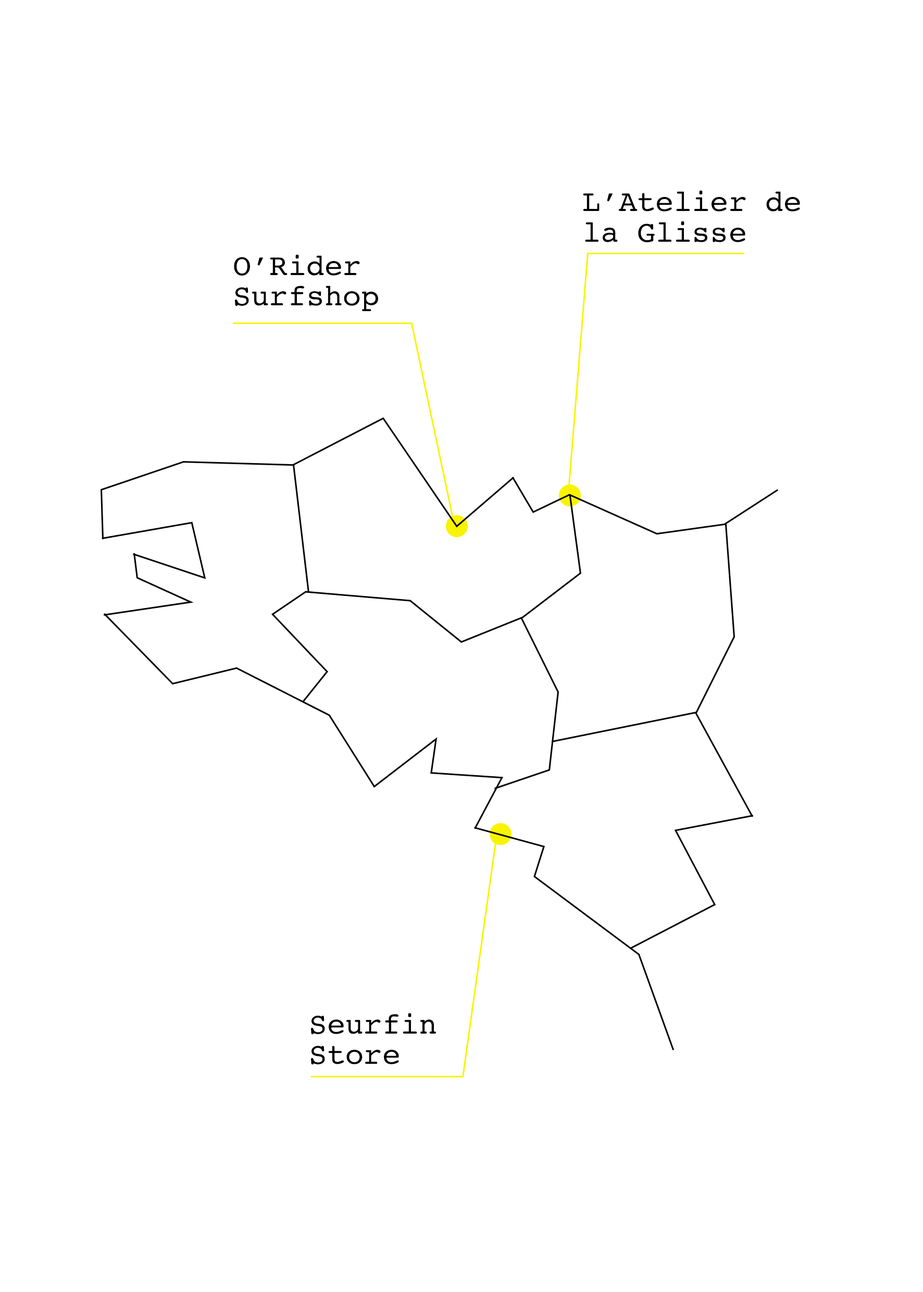
<style>
.page{position:relative;width:923px;height:1292px;background:#ffffff}
.page>*{position:absolute;margin:0}
.t1{font:30.4px/30.4px "Courier10PitchBT-Roman";color:#000000}
</style>
<div class="page">
<p class="t1" style="left:583px;top:190px;width:217px;height:52px">L’Atelier de <br>la Glisse</p>
<p class="t1" style="left:234px;top:254px;width:144px;height:58px;text-align:right">O’Rider <br>Surfshop</p>
<p class="t1" style="left:311px;top:1013px;width:125px;height:52px">Seurfin<br>Store</p>
</div>
